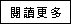
<style>
.page{position:relative;width:71px;height:24px;background:#ffffff}
.page>*{position:absolute;margin:0}
.t1{font:12px "MicrosoftJhengHeiRegular";letter-spacing:0.1em;color:#000000}
</style>
<div class="page">
<p class="t1" style="left:11px;top:7px;width:50px;height:11px">閱讀更多</p>
</div>
